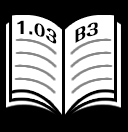
<style>
.page{position:relative;width:128px;height:132px;background:#000000}
.page>*{position:absolute;margin:0}
.t1{font:16px "FolkPro-Heavy";color:#000000}
</style>
<div class="page">
<p class="t1" style="left:17px;top:20px;width:40px;height:24px">1.03</p>
<p class="t1" style="left:75px;top:22px;width:23px;height:21px">B3</p>
</div>
